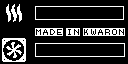
<style>
.page{position:relative;width:128px;height:64px;background:#000000}
.page>*{position:absolute;margin:0}
.t1{font:8px "BitMap";color:#ffffff}
</style>
<div class="page">
<p class="t1" style="left:35px;top:28px;width:90px;height:8px">MADE IN KWARON</p>
</div>
